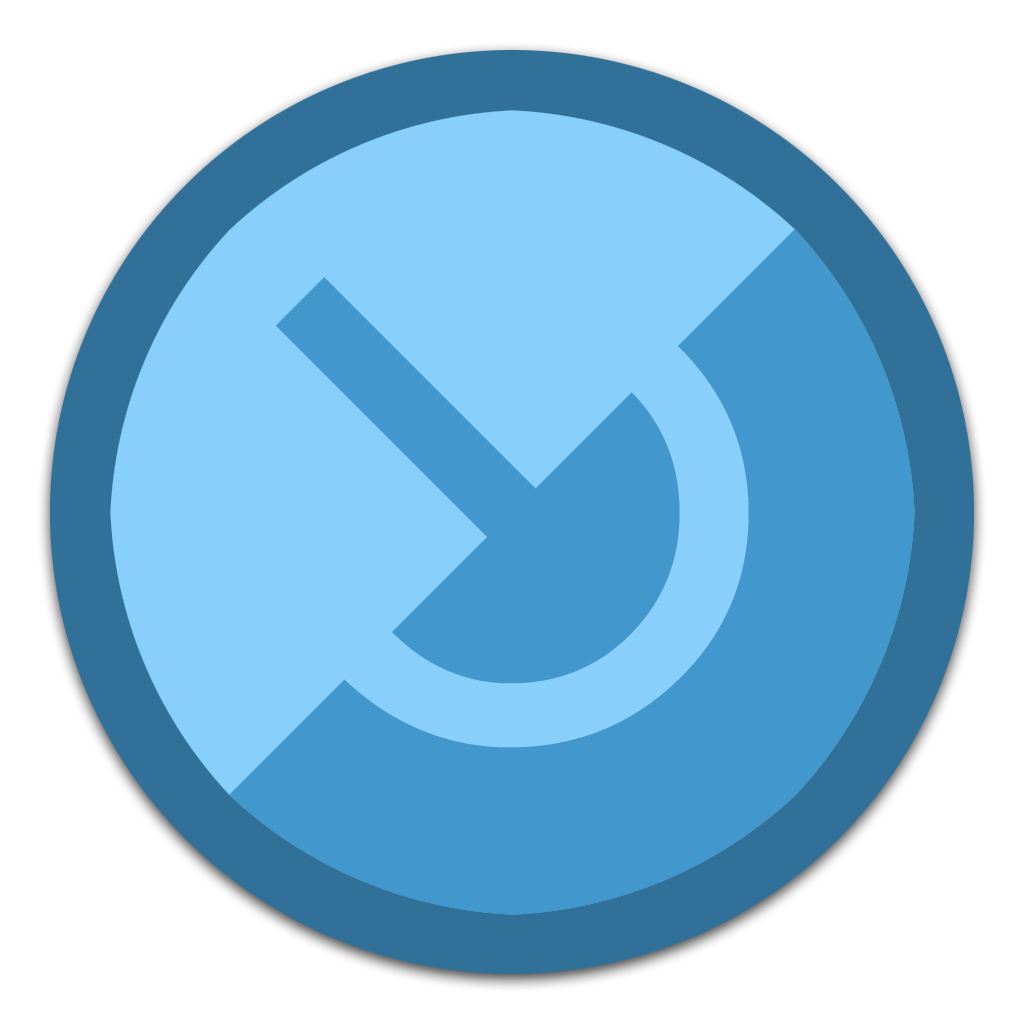
<style>
.page{position:relative;width:1024px;height:1024px;background:#ffffff}
.page>*{position:absolute;margin:0}
.t1{font:600px "Futura-Medium";color:#88cffb}
.t2{font:600px "Futura-Medium";color:#4297cc}
</style>
<div class="page">
<p class="t1" style="left:275px;top:278px;width:474px;height:470px">O</p>
<p class="t2" style="left:276px;top:277px;width:369px;height:369px;rotate:-45deg">I</p>
</div>
